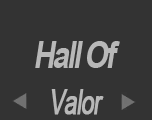
<style>
.page{position:relative;width:152px;height:120px;background:#333333}
.page>*{position:absolute;margin:0}
.t1{font:37.3px "Arial-BoldMT";letter-spacing:-0.08em;color:#b8b8b8;font-style:italic;scale:0.8 1}
.t2{font:34px "ArialMT";letter-spacing:-0.05em;color:#b8b8b8;font-weight:bold;font-style:italic;scale:0.68 1}
</style>
<div class="page">
<p class="t1" style="left:35px;top:41px;width:85px;height:27px">Hall Of</p>
<p class="t2" style="left:51px;top:89px;width:53px;height:26px">Valor</p>
</div>
